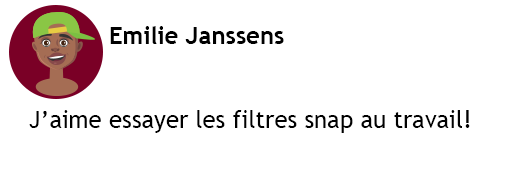
<style>
.page{position:relative;width:512px;height:188px;background:#ffffff}
.page>*{position:absolute;margin:0}
.t1{font:24px "TrebuchetMS-Bold";color:#000000}
.t2{font:24px "TrebuchetMS";color:#000000}
</style>
<div class="page">
<p class="t1" style="left:110px;top:26px;width:174px;height:18px">Emilie Janssens</p>
<p class="t2" style="left:29px;top:110px;width:441px;height:23px">J’aime essayer les filtres snap au travail!</p>
</div>
